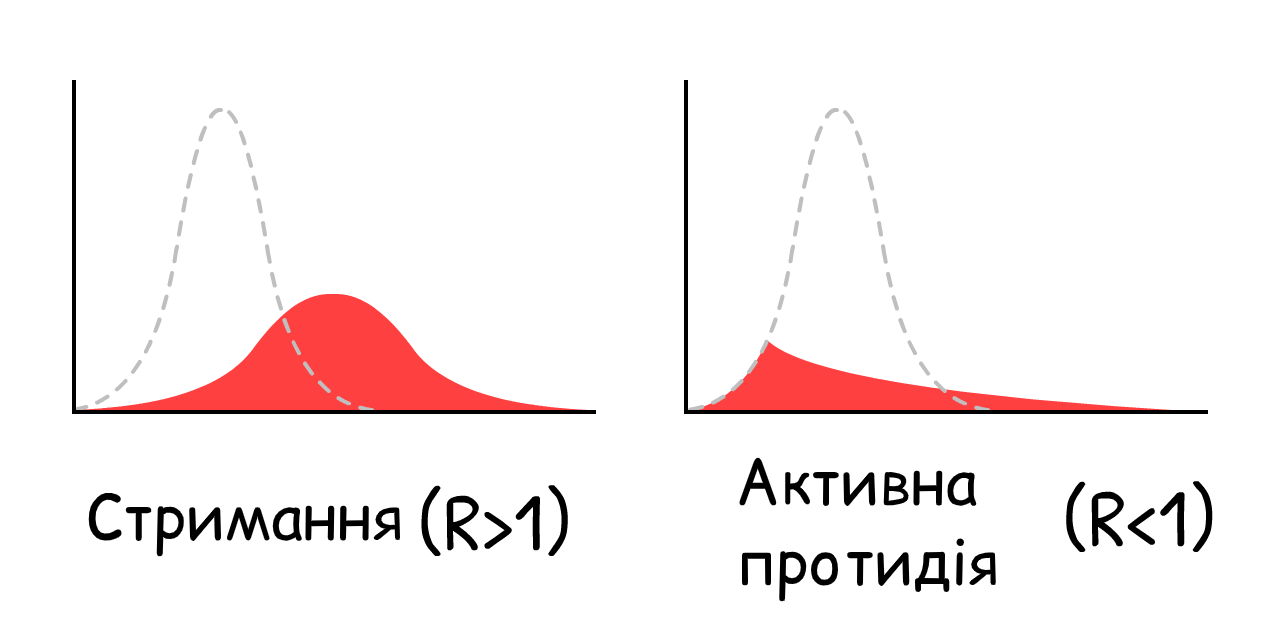
<style>
.page{position:relative;width:1280px;height:640px;background:#ffffff}
.page>*{position:absolute;margin:0}
.t1{font:62px/80px "ComicRelief";color:#000000}
.t2{font:62px "ComicRelief";color:#000000}
</style>
<div class="page">
<p class="t1" style="left:738px;top:457px;width:258px;height:145px">Активна <br>протидія</p>
<p class="t2" style="left:88px;top:491px;width:313px;height:66px">Стримання</p>
</div>
